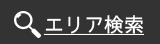
<style>
.page{position:relative;width:160px;height:44px;background:#333333}
.page>*{position:absolute;margin:0}
.t1{font:20px "BokutachinoGothic";color:#ffffff;text-decoration:underline}
</style>
<div class="page">
<p class="t1" style="left:43px;top:15px;width:101px;height:20px">エリア検索</p>
</div>
